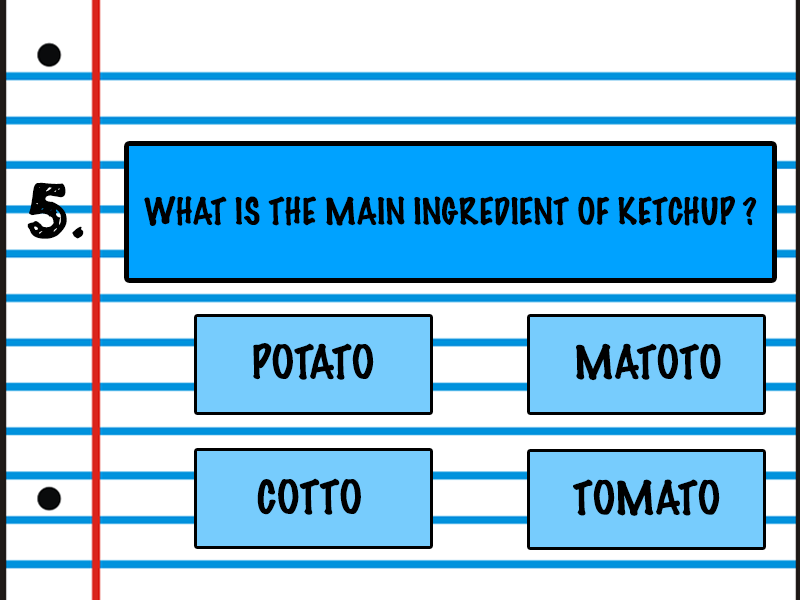
<style>
.page{position:relative;width:800px;height:600px;background:#ffffff}
.page>*{position:absolute;margin:0}
.t1{font:66.7px "Golden-Star";color:#000000}
.t2{font:33.3px "MarkerFelt-Thin";color:#000000}
.t3{font:41.7px "MarkerFelt-Thin";color:#000000}
</style>
<div class="page">
<p class="t1" style="left:27px;top:182px;width:57px;height:57px">5.</p>
<p class="t2" style="left:144px;top:196px;width:613px;height:30px">WHAT IS THE MAIN INGREDIENT OF KETCHUP ?</p>
<p class="t3" style="left:253px;top:343px;width:121px;height:37px">POTATO</p>
<p class="t3" style="left:576px;top:343px;width:145px;height:38px">MATOTO</p>
<p class="t3" style="left:257px;top:478px;width:104px;height:37px">COTTO</p>
<p class="t3" style="left:573px;top:479px;width:147px;height:37px">TOMATO</p>
</div>
